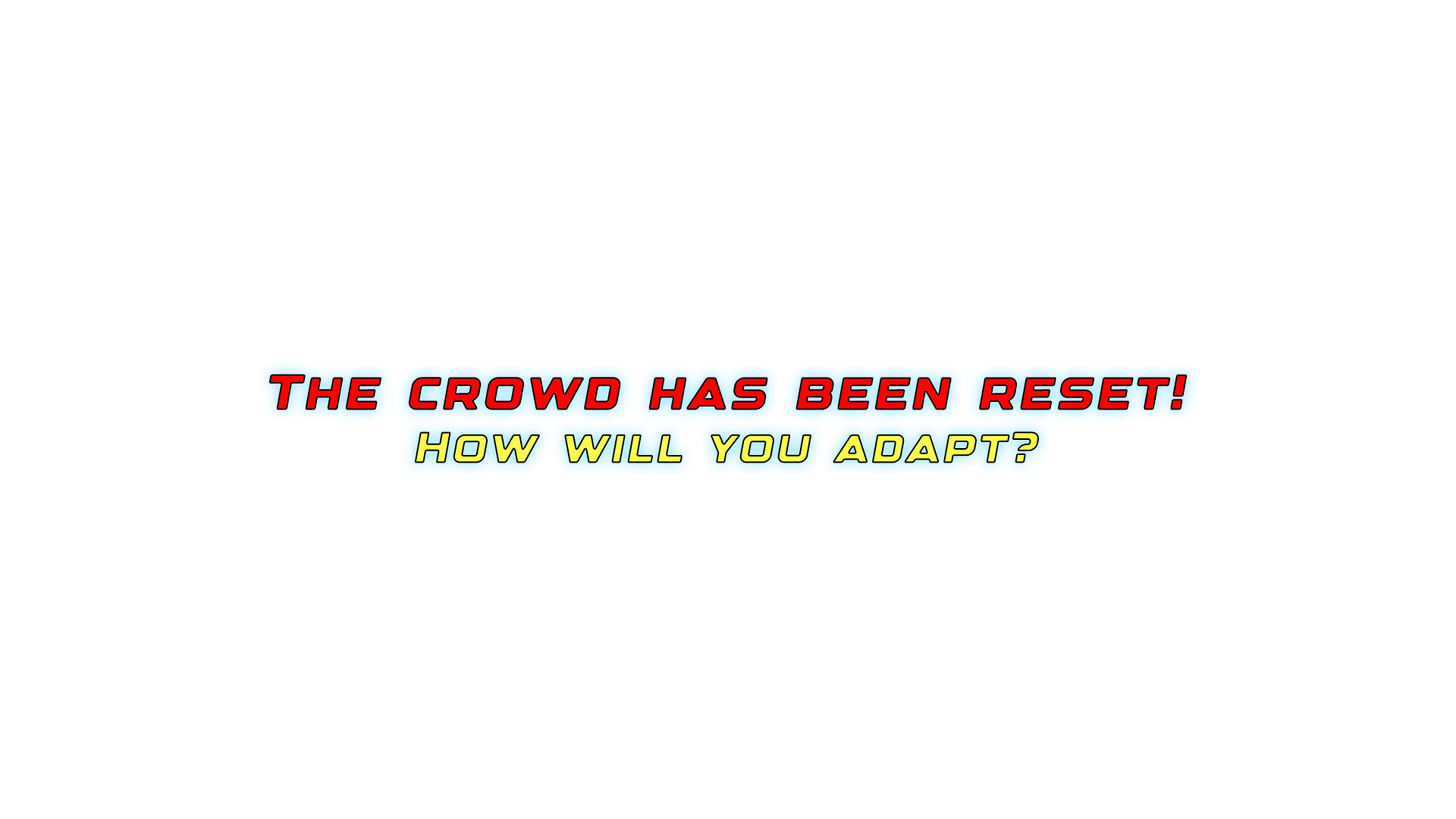
<style>
.page{position:relative;width:1456px;height:819px;background:#ffffff}
.page>*{position:absolute;margin:0}
.t1{font:50.6px "DesignerRegular";letter-spacing:0.05em;color:#ff0000}
.t2{font:44.2px "DesignerRegular";letter-spacing:0.05em;color:#f8fa4d}
</style>
<div class="page">
<p class="t1" style="left:269px;top:374px;width:919px;height:89px;text-align:center">The crowd has been reset!<br><span class="t2">How will you adapt?</span></p>
</div>
